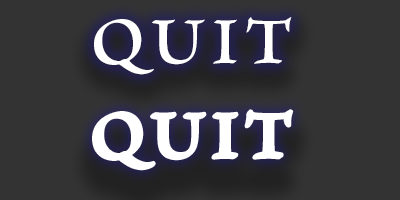
<style>
.page{position:relative;width:400px;height:200px;background:#333333}
.page>*{position:absolute;margin:0}
.t1{font:70px "TpldYiFengScripture";letter-spacing:0.1em;color:#ffffff;text-transform:uppercase}
</style>
<div class="page">
<p class="t1" style="left:94px;top:17px;width:198px;height:58px">QUit</p>
<p class="t1" style="left:94px;top:111px;width:198px;height:58px">Quit</p>
</div>
